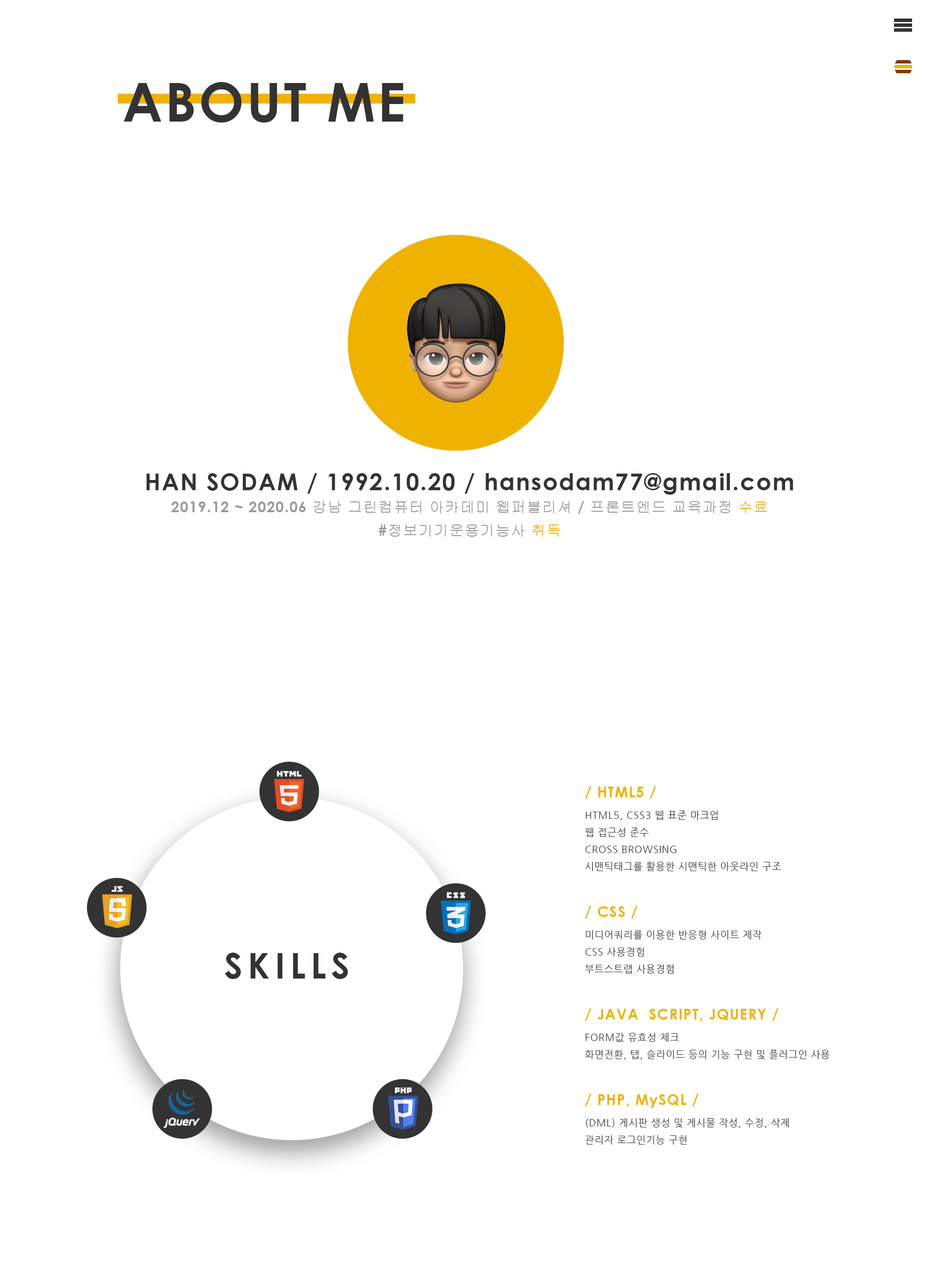
<style>
.page{position:relative;width:938px;height:1271px;background:#ffffff}
.page>*{position:absolute;margin:0}
.t1{font:53.7px "CenturyGothic-Bold";letter-spacing:0.05em;color:#333333;text-transform:uppercase}
.t2{font:23.4px/29.3px "CenturyGothic-Bold";letter-spacing:0.05em;color:#333333;text-transform:uppercase}
.t3{font:23.4px/29.3px "CenturyGothic-Bold";letter-spacing:0.05em;color:#333333}
.t4{font:14.7px/23.4px "CenturyGothic-Bold";letter-spacing:0.05em;color:#999999;text-transform:uppercase}
.t5{font:14.7px/23.4px "Gulim";letter-spacing:0.05em;color:#999999;text-transform:uppercase}
.t6{font:14.7px/23.4px "Gulim";letter-spacing:0.05em;color:#efb200;text-transform:uppercase}
.t7{font:9.8px "NanumGothic";letter-spacing:0.05em;color:#333333;text-transform:uppercase}
.t8{font:14.7px "CenturyGothic-Bold";letter-spacing:0.05em;color:#efb200;text-transform:uppercase}
.t9{font:14.7px "CenturyGothic-Bold";letter-spacing:0.05em;color:#efb200}
.t10{font:35.2px "CenturyGothic-Bold";letter-spacing:0.15em;color:#333333;text-transform:uppercase}
</style>
<div class="page">
<p class="t1" style="left:124px;top:82px;width:279px;height:41px">about me</p>
<p class="t2" style="left:147px;top:473px;width:646px;height:64px;text-align:center">HAN SODAM / 1992.10.20 / <span class="t3">hansodam77@gmail.com<br></span><span class="t4">2019.12 ~ 2020.06 </span><span class="t5">강남 그린컴퓨터 아카데미 웹퍼블리셔</span><span class="t4"> / </span><span class="t5">프론트엔드 교육과정 </span><span class="t6">수료<br></span><span class="t4">#</span><span class="t5">정보기기운용기능사 </span><span class="t6">취득</span></p>
<p class="t7" style="left:585px;top:786px;width:245px;height:359px"><span class="t8">/ HTML5 /<br></span>HTML5, CSS3 웹 표준 마크업<br>웹 접근성 준수<br>Cross Browsing<br>시맨틱태그를 활용한 시맨틱한 아웃라인 구조<br><br><span class="t8">/ CSS /<br></span>미디어쿼리를 이용한 반응형 사이트 제작<br>CSS 사용경험<br>부트스트랩 사용경험<br><br><span class="t8">/ Java  Script, jQuery /<br></span>Form값 유효성 체크<br>화면전환, 탭, 슬라이드 등의 기능 구현 및 플러그인 사용<br><br><span class="t8">/ PHP, M</span><span class="t9">y</span><span class="t8">SQL /<br></span>(DML) 게시판 생성 및 게시물 작성, 수정, 삭제<br>관리자 로그인기능 구현</p>
<p class="t10" style="left:225px;top:953px;width:123px;height:26px">skills</p>
</div>
